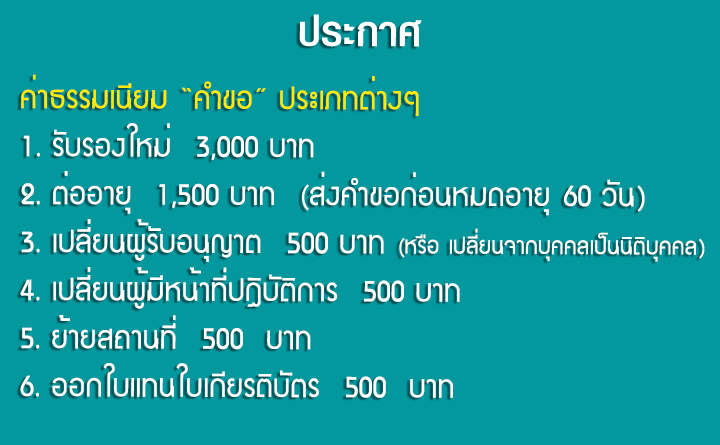
<style>
.page{position:relative;width:720px;height:445px;background:#03989e}
.page>*{position:absolute;margin:0}
.t1{font:60px "PSLDisplayCSBold";color:#ffffff}
.t2{font:40px "JSThanaporn-Normal";color:#ffffff}
.t3{font:40px "JSThanaporn-Normal";color:#ffea05}
.t4{font:30px "JSThanaporn-Normal";color:#ffffff}
</style>
<div class="page">
<p class="t1" style="left:299px;top:14px;width:123px;height:33px">ประกาศ</p>
<p class="t2" style="left:20px;top:74px;width:685px;height:324px"><span class="t3">ค่าธรรมเนียม “คำขอ” ประเภทต่างๆ<br></span>1. รับรองใหม่  3,000 บาท<br>2. ต่ออายุ  1,500 บาท  (ส่งคำขอก่อนหมดอายุ 60 วัน)<br>3. เปลี่ยนผู้รับอนุญาต  500 บาท <span class="t4">(หรือ เปลี่ยนจากบุคคลเป็นนิติบุคคล)<br></span>4. เปลี่ยนผู้มีหน้าที่ปฏิบัติการ  500 บาท<br>5. ย้ายสถานที่  500  บาท<br>6. ออกใบแทนใบเกียรติบัตร  500  บาท</p>
</div>
